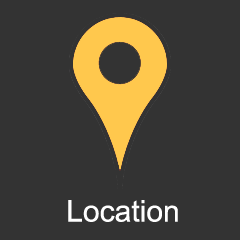
<style>
.page{position:relative;width:240px;height:240px;background:#333333}
.page>*{position:absolute;margin:0}
.t1{font:30px "ArialMT";color:#ffffff}
</style>
<div class="page">
<p class="t1" style="left:68px;top:200px;width:110px;height:22px">Location</p>
</div>
